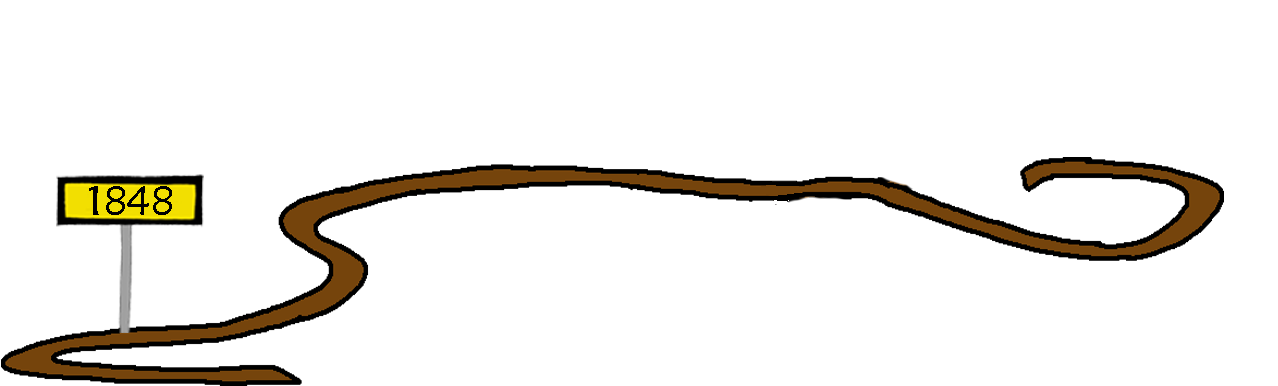
<style>
.page{position:relative;width:1278px;height:386px;background:#ffffff}
.page>*{position:absolute;margin:0}
.t1{font:41.7px "MaiandraGD-Regular";color:#000000}
</style>
<div class="page">
<p class="t1" style="left:89px;top:186px;width:83px;height:29px">1848</p>
</div>
